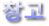
<style>
.page{position:relative;width:49px;height:26px;background:#ffffff}
.page>*{position:absolute;margin:0}
.t1{font:22px "MalgunGothicBold"}
</style>
<div class="page">
<p class="t1" style="left:2px;top:0px;width:42px;height:21px">창고</p>
</div>
